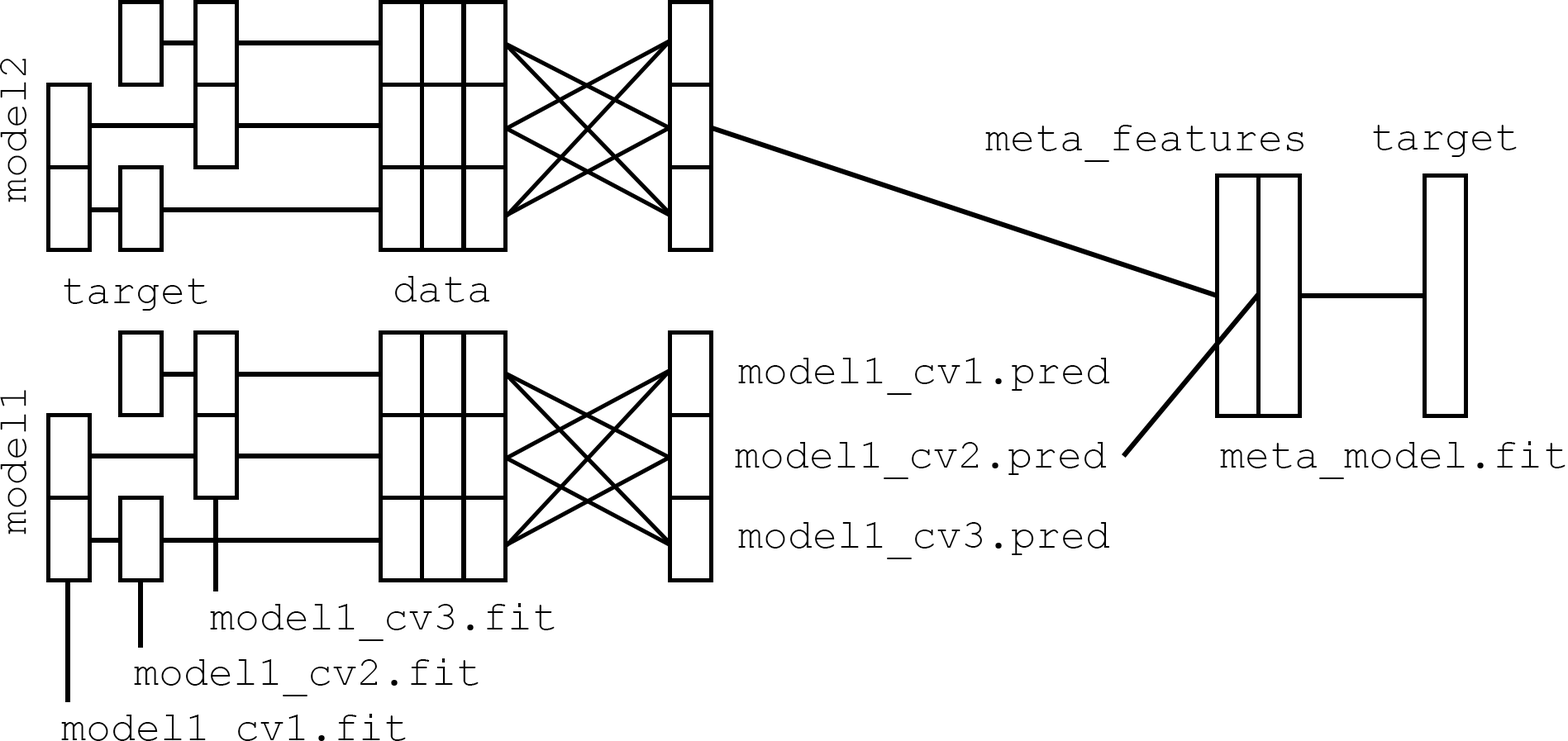
<style>
.page{position:relative;width:1568px;height:741px;background:#ffffff}
.page>*{position:absolute;margin:0}
.t1{font:41.2px "CourierNewPSMT";color:#000000}
.t2{font:41.3px "CourierNewPSMT";color:#000000}
</style>
<div class="page">
<p class="t1" style="left:0px;top:59px;width:27px;height:144px;rotate:-90deg">model2</p>
<p class="t2" style="left:985px;top:125px;width:318px;height:37px">meta_features</p>
<p class="t2" style="left:1373px;top:125px;width:144px;height:32px">target</p>
<p class="t2" style="left:64px;top:279px;width:143px;height:32px">target</p>
<p class="t1" style="left:395px;top:276px;width:95px;height:27px">data</p>
<p class="t2" style="left:738px;top:358px;width:372px;height:37px">model1_cv1.pred</p>
<p class="t1" style="left:0px;top:390px;width:27px;height:145px;rotate:-90deg">model1</p>
<p class="t2" style="left:735px;top:442px;width:372px;height:37px">model1_cv2.pred</p>
<p class="t2" style="left:1220px;top:441px;width:346px;height:38px">meta_model.fit</p>
<p class="t2" style="left:738px;top:522px;width:372px;height:38px">model1_cv3.pred</p>
<p class="t2" style="left:210px;top:603px;width:345px;height:38px">model1_cv3.fit</p>
<p class="t2" style="left:134px;top:659px;width:345px;height:38px">model1_cv2.fit</p>
</div>
